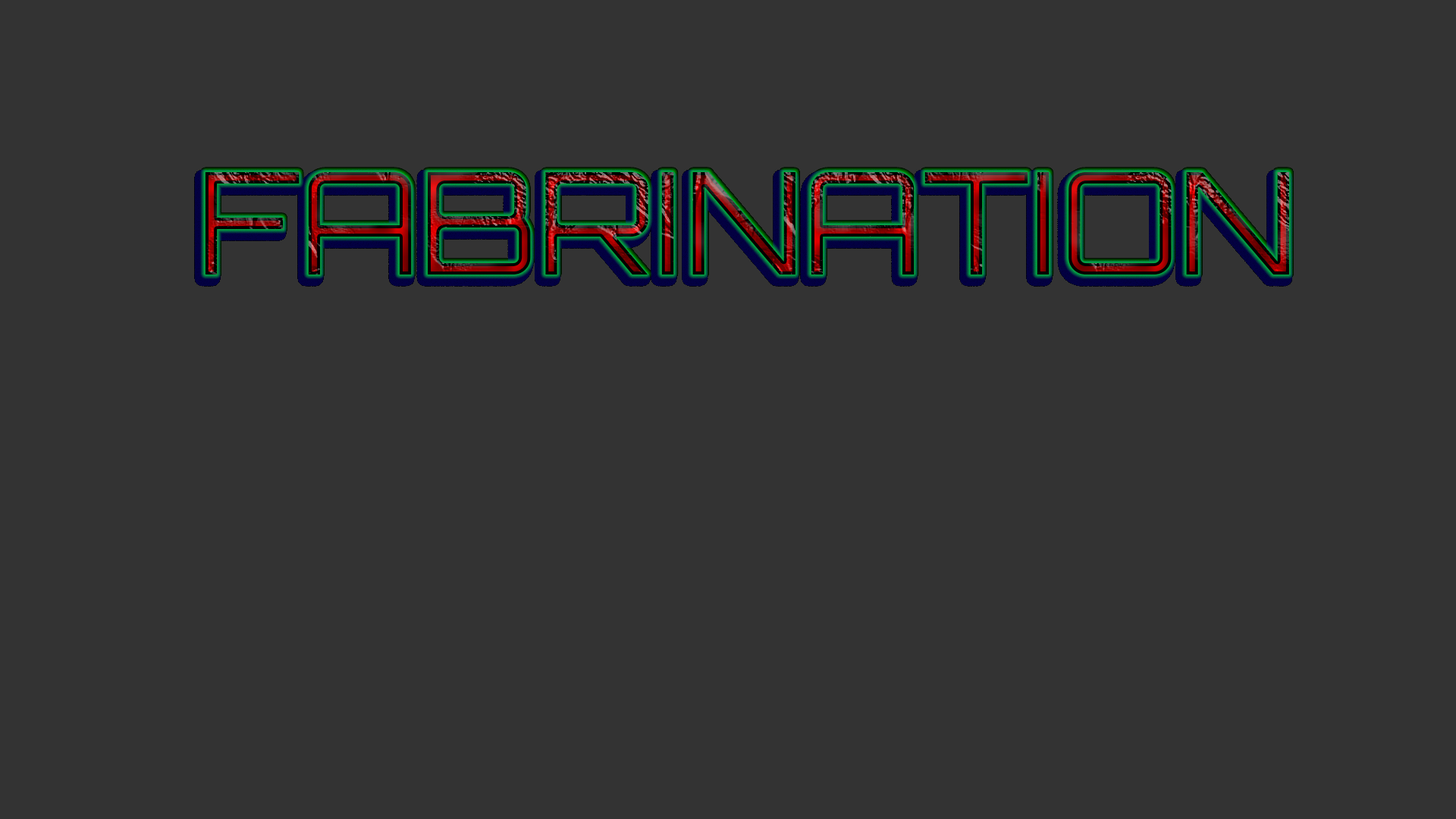
<style>
.page{position:relative;width:1456px;height:819px;background:#333333}
.page>*{position:absolute;margin:0}
.t1{font:142.2px "Orbitron-Regular"}
</style>
<div class="page">
<p class="t1" style="left:205px;top:172px;width:1084px;height:103px">FABRINATION</p>
</div>
